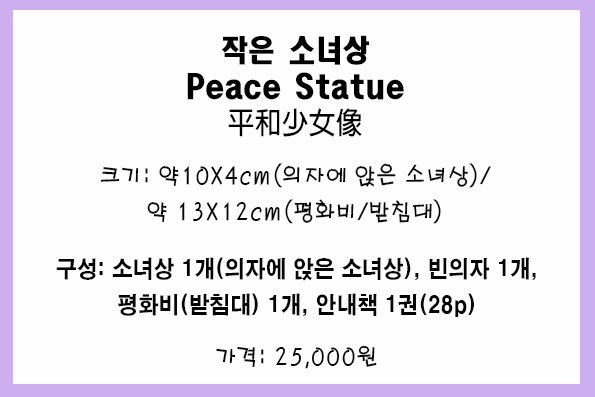
<style>
.page{position:relative;width:595px;height:397px;background:#fffefe}
.page>*{position:absolute;margin:0}
.t1{font:30px/36px "HeadlineR-HM";color:#010101;scale:0.9 1}
.t2{font:30px/36px "AdobeFanHeitiStd-Bold";color:#010101;scale:0.9 1}
.t3{font:24px/36px "H2porM";color:#040404;scale:0.9 1}
.t4{font:23px/36px "H2gtrE";color:#040404;scale:0.9 1}
.t5{font:24px "H2porM";color:#040404;scale:0.9 1}
</style>
<div class="page">
<p class="t1" style="left:187px;top:35px;width:217px;height:102px;text-align:center">작은 소녀상<br>Peace Statue<br><span class="t2">平和少女像</span></p>
<p class="t3" style="left:100px;top:163px;width:391px;height:61px;text-align:center">크기: 약10X4cm(의자에 앉은 소녀상)/<br>약 13X12cm(평화비/받침대)</p>
<p class="t4" style="left:56px;top:257px;width:480px;height:60px;text-align:center">구성: 소녀상 1개(의자에 앉은 소녀상), 빈의자 1개,<br>평화비(받침대) 1개, 안내책 1권(28p)</p>
<p class="t5" style="left:216px;top:345px;width:161px;height:24px">가격: 25,000원</p>
</div>
